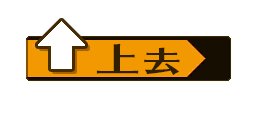
<style>
.page{position:relative;width:256px;height:128px;background:#ffffff}
.page>*{position:absolute;margin:0}
.t1{font:33.3px "SkipStd-B";letter-spacing:0.125em;color:#301f00;scale:1.35 1}
.t2{font:29.3px "SkipStd-B";letter-spacing:0.125em;color:#301f00;scale:1.35 1}
</style>
<div class="page">
<p class="t1" style="left:96px;top:43px;width:43px;height:31px">上</p>
<p class="t2" style="left:144px;top:47px;width:36px;height:28px">去</p>
</div>
